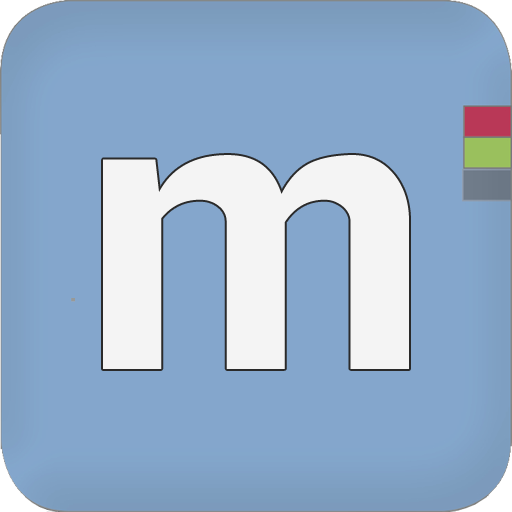
<style>
.page{position:relative;width:512px;height:512px;background:#84a6cc}
.page>*{position:absolute;margin:0}
.t1{font:366.7px "CharcoalCY";color:#f4f4f4}
</style>
<div class="page">
<p class="t1" style="left:103px;top:155px;width:306px;height:214px">m</p>
</div>
